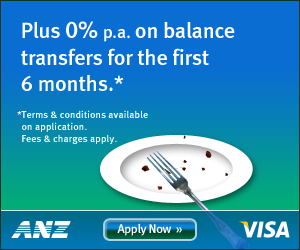
<style>
.page{position:relative;width:300px;height:250px;background:#096dd1}
.page>*{position:absolute;margin:0}
.t1{font:22px "MetaMediumLF-Roman";letter-spacing:-0.01em;color:#ffffff}
.t2{font:24px "MetaMediumLF-Roman";letter-spacing:-0.01em;color:#ffffff}
.t3{font:18px "MetaMediumLF-Roman";letter-spacing:-0.01em;color:#ffffff}
.t4{font:10px "MetaMediumLF-Roman";letter-spacing:0.01em;color:#ffffff}
.t5{font:12.5px "MetaMediumLF-Roman";letter-spacing:-0.025em;color:#ffffff}
.t6{font:12.5px "MetaMediumLF-Roman";letter-spacing:-0.01em;color:#ffffff}
</style>
<div class="page">
<p class="t1" style="left:21px;top:21px;width:214px;height:70px">Plus <span class="t2">0% </span><span class="t3">p.a. </span>on balance<br>transfers for the first<br>6 months.*</p>
<p class="t4" style="left:17px;top:110px;width:131px;height:34px">*Terms &amp; conditions available <br>  on application. <br>  Fees &amp; charges apply.</p>
<p class="t5" style="left:117px;top:223px;width:65px;height:13px">Apply Now  <span class="t6">»</span></p>
</div>
